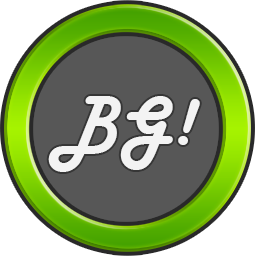
<style>
.page{position:relative;width:256px;height:256px;background:#575757}
.page>*{position:absolute;margin:0}
.t1{font:72px "HarlowSolid";color:#ffffff}
</style>
<div class="page">
<p class="t1" style="left:48px;top:96px;width:152px;height:76px">BG!</p>
</div>
